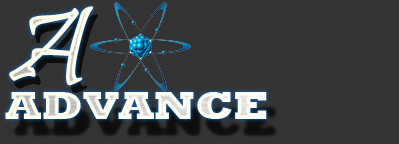
<style>
.page{position:relative;width:399px;height:144px;background:#333333}
.page>*{position:absolute;margin:0}
.t1{font:118.1px "Pristina-Regular";color:#ffffec}
.t2{font:40px "Rockwell-ExtraBold";color:#f8f8f8;scale:1.19 1}
</style>
<div class="page">
<p class="t1" style="left:9px;top:6px;width:85px;height:80px;rotate:7deg">A</p>
<p class="t2" style="left:5px;top:92px;width:262px;height:27px">ADVANCE</p>
</div>
